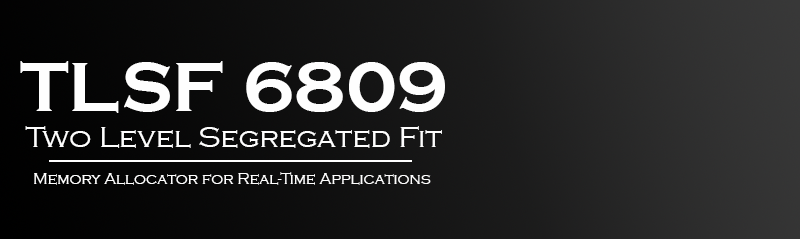
<style>
.page{position:relative;width:800px;height:239px}
.page>*{position:absolute;margin:0}
.t1{font:30px "CopperplateGothic-Light";color:#fefefe}
.t2{font:72px "CopperplateGothic-Bold";color:#fefefe}
.t3{font:16px "CopperplateGothic-Light";color:#fefefe}
</style>
<div class="page">
<p class="t1" style="left:20px;top:61px;width:425px;height:87px;text-align:center"><span class="t2">TLSF 6809<br></span>Two Level Segregated Fit</p>
<p class="t3" style="left:34px;top:172px;width:397px;height:13px">Memory Allocator for Real-Time Applications</p>
</div>
